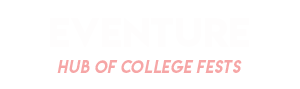
<style>
.page{position:relative;width:300px;height:89px;background:#ffffff}
.page>*{position:absolute;margin:0}
.t1{font:16px "LemonMilkitalic";color:#f6a6a6}
</style>
<div class="page">
<p class="t1" style="left:57px;top:60px;width:185px;height:13px">hub of college fests</p>
</div>
